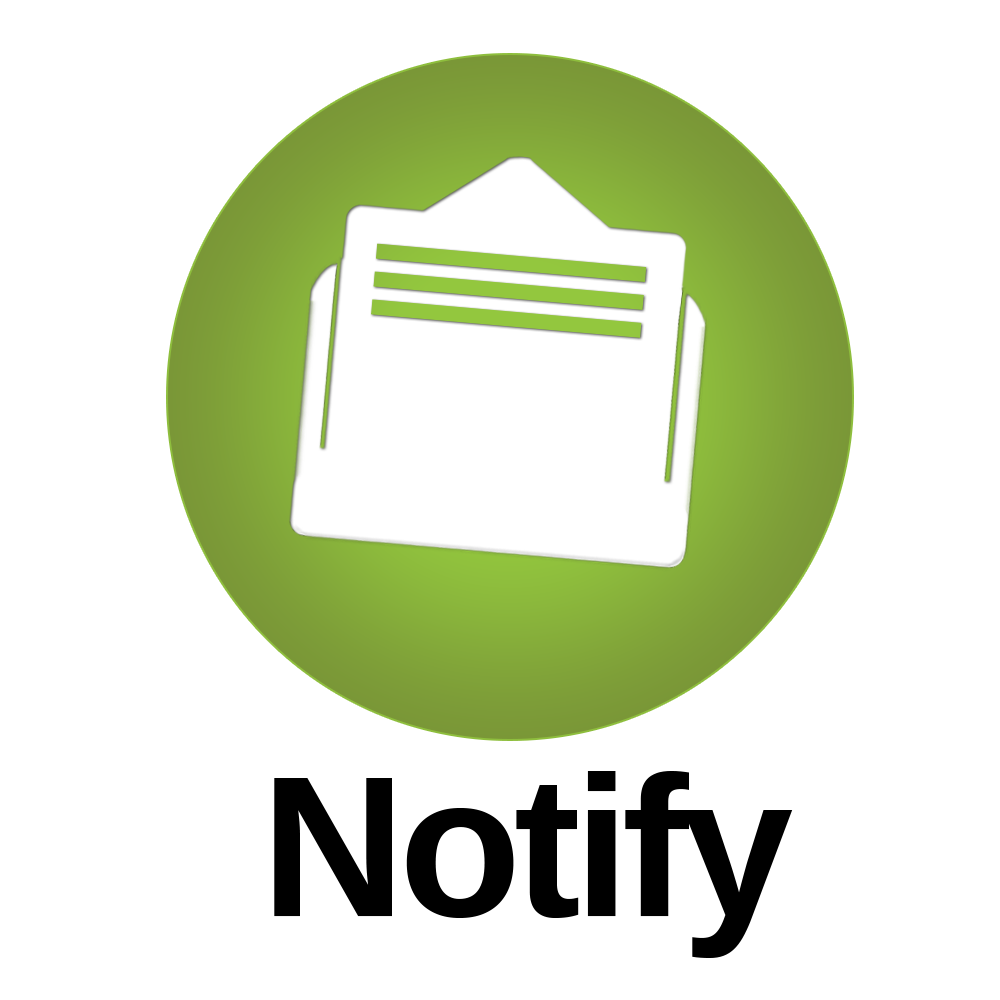
<style>
.page{position:relative;width:1000px;height:1000px;background:#ffffff}
.page>*{position:absolute;margin:0}
.t1{font:200px "LiberationSans-Bold";letter-spacing:-0.035em;color:#000000}
</style>
<div class="page">
<p class="t1" style="left:274px;top:771px;width:519px;height:187px">Notify</p>
</div>
